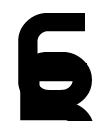
<style>
.page{position:relative;width:111px;height:121px;background:#ffffff}
.page>*{position:absolute;margin:0}
.t1{font:150px "UnisectExtraBold";color:#000000;scale:1.06 1}
</style>
<div class="page">
<p class="t1" style="left:18px;top:13px;width:74px;height:96px">6</p>
</div>
